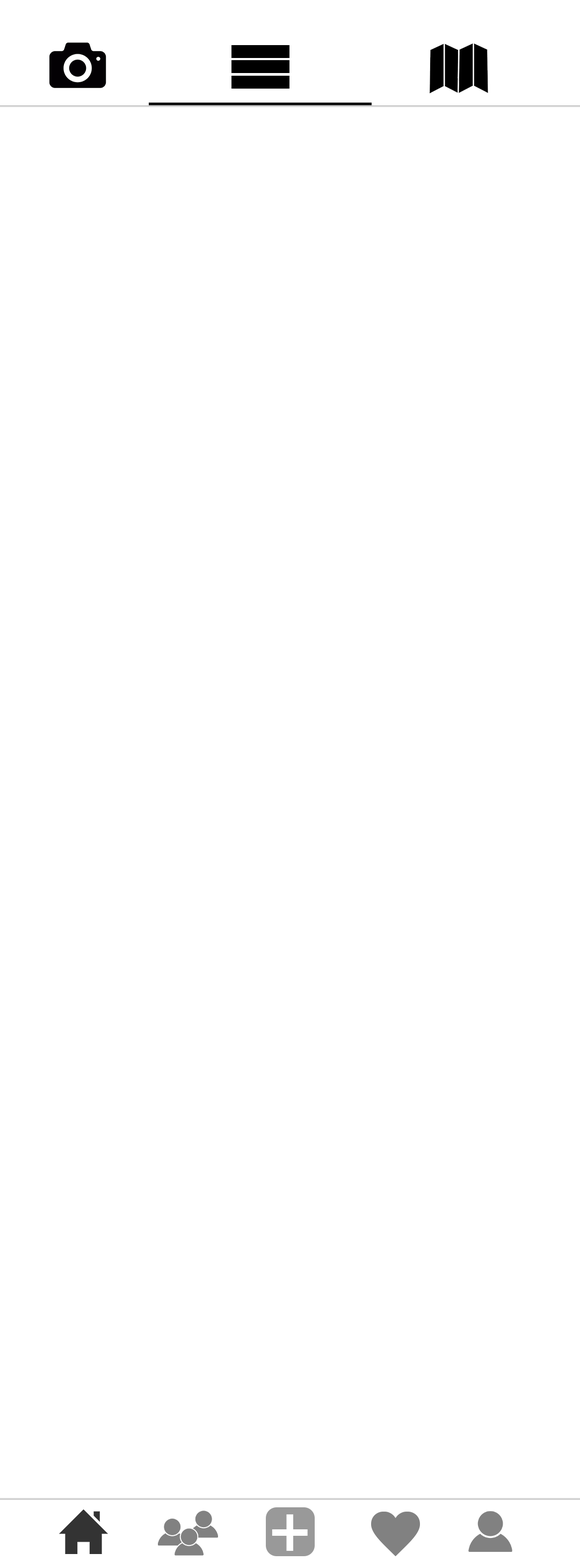
<style>
.page{position:relative;width:580px;height:1568px;background:#ffffff}
.page>*{position:absolute;margin:0}
.t1{font:68.4px "MyriadPro-Bold";color:#ffffff}
</style>
<div class="page">
<p class="t1" style="left:272px;top:1514px;width:36px;height:37px">+</p>
</div>
